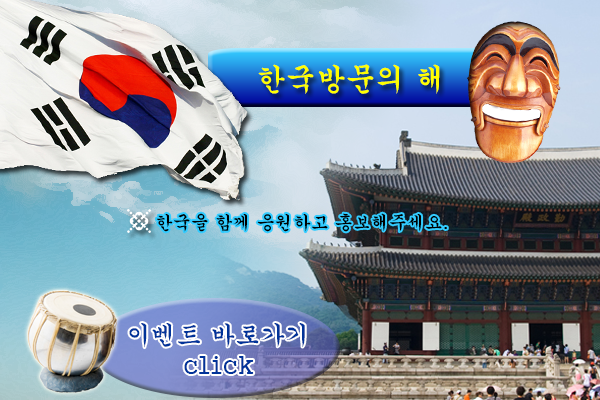
<style>
.page{position:relative;width:600px;height:400px}
.page>*{position:absolute;margin:0}
.t1{font:30px "Gungsuh";color:#ffff00}
.t2{font:18px "Gungsuh";color:#000000}
.t3{font:25px "Gungsuh";color:#003399}
</style>
<div class="page">
<p class="t1" style="left:258px;top:64px;width:182px;height:30px">한국방문의 해</p>
<p class="t2" style="left:156px;top:213px;width:291px;height:19px">한국을 함께 응원하고 홍보해주세요.</p>
<p class="t3" style="left:129px;top:323px;width:176px;height:51px;text-align:center">이벤트 바로가기<br>click</p>
</div>
